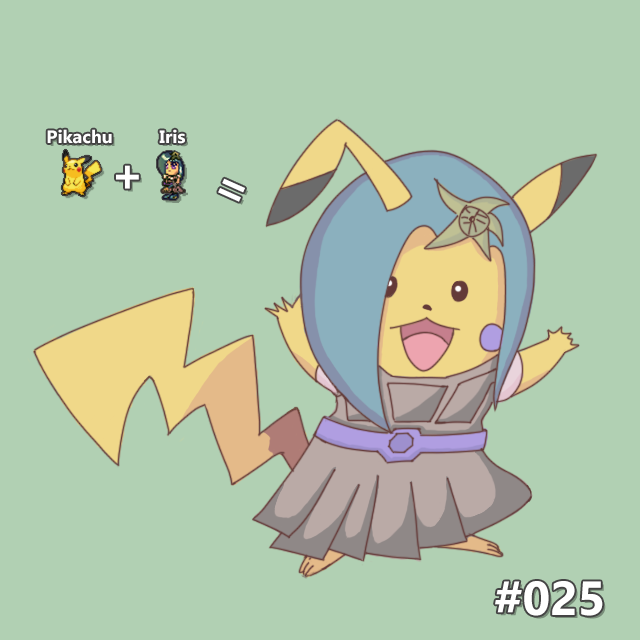
<style>
.page{position:relative;width:640px;height:640px;background:#b1d0b3}
.page>*{position:absolute;margin:0}
.t1{font:18px "Gadugi-Bold";color:#ffffff}
.t2{font:48px "Gadugi-Bold";color:#ffffff}
</style>
<div class="page">
<p class="t1" style="left:47px;top:129px;width:65px;height:15px">Pikachu</p>
<p class="t1" style="left:159px;top:129px;width:26px;height:15px">Iris</p>
<p class="t2" style="left:116px;top:165px;width:23px;height:24px">+</p>
<p class="t2" style="left:218px;top:178px;width:27px;height:24px;rotate:24deg">=</p>
<p class="t2" style="left:495px;top:581px;width:108px;height:35px">#025</p>
</div>
